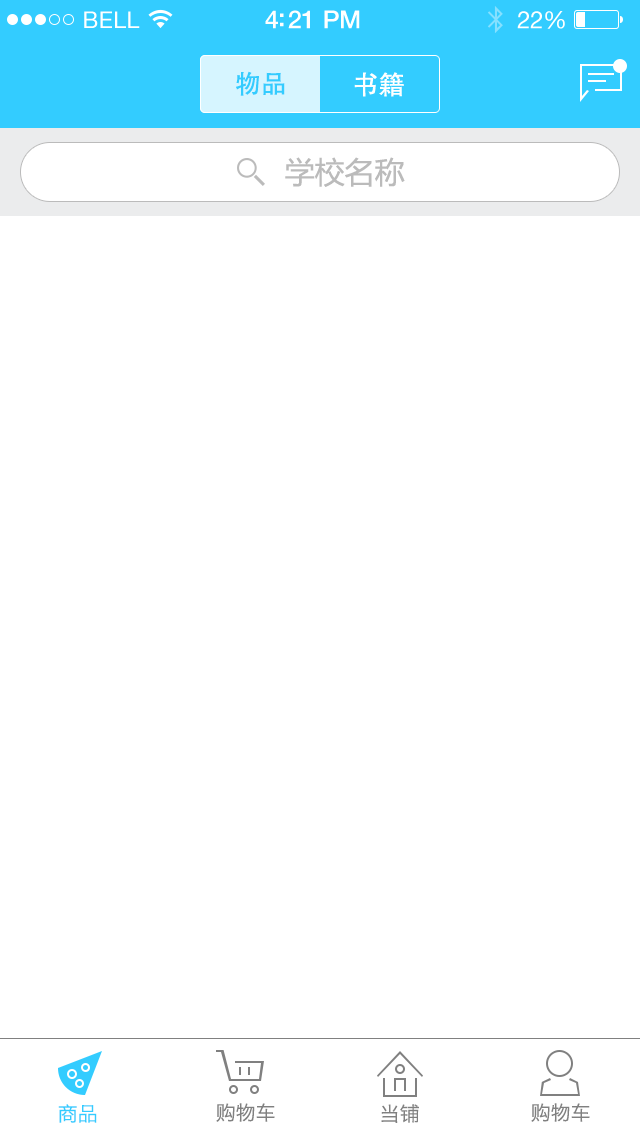
<style>
.page{position:relative;width:640px;height:1136px;background:#ffffff}
.page>*{position:absolute;margin:0}
.t1{font:23px "HelveticaNeue";letter-spacing:0.02em;color:#ffffff}
.t2{font:25px "HelveticaNeue-Medium";letter-spacing:-0.02em;color:#ffffff}
.t3{font:24px "HelveticaNeue";letter-spacing:-0.02em;color:#ffffff}
.t4{font:26px "AdobeHeitiStd-Regular";color:#33ccff}
.t5{font:26px "FZHTJW--GB1-0";color:#ffffff}
.t6{font:30px "MicrosoftYaHei";color:#bbbbbb}
.t7{font:20px "MingHei_R";color:#33ccff}
.t8{font:20px "MingHei_R";color:#808080}
</style>
<div class="page">
<p class="t1" style="left:84px;top:11px;width:56px;height:17px">BELL</p>
<p class="t2" style="left:265px;top:10px;width:95px;height:19px">4:21 PM</p>
<p class="t3" style="left:517px;top:11px;width:48px;height:18px">22%</p>
<p class="t4" style="left:236px;top:71px;width:49px;height:25px">物品</p>
<p class="t5" style="left:354px;top:72px;width:50px;height:25px">书籍</p>
<p class="t6" style="left:285px;top:157px;width:120px;height:30px">学校名称</p>
<p class="t7" style="left:58px;top:1104px;width:39px;height:19px">商品</p>
<p class="t8" style="left:216px;top:1103px;width:59px;height:19px">购物车</p>
<p class="t8" style="left:381px;top:1104px;width:38px;height:19px">当铺</p>
<p class="t8" style="left:531px;top:1103px;width:59px;height:19px">购物车</p>
</div>
